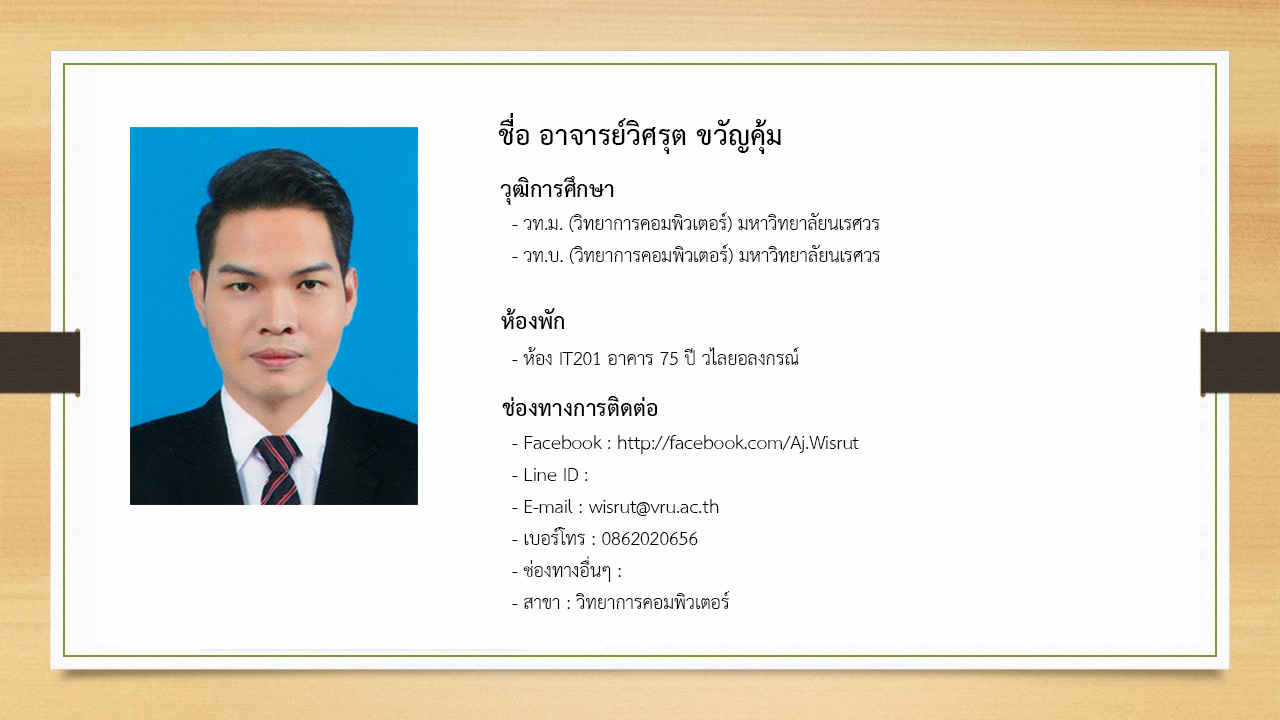
<style>
.page{position:relative;width:1280px;height:720px;background:#fdfdfb}
.page>*{position:absolute;margin:0}
.t1{font:40px "THSarabunPSK-Bold";color:#000000}
.t2{font:32px "THSarabunPSK-Bold";color:#000000}
.t3{font:26.7px "THSarabunPSK";color:#000000}
</style>
<div class="page">
<p class="t1" style="left:498px;top:113px;width:283px;height:41px">ชื่อ อาจารย์วิศรุต ขวัญคุ้ม</p>
<p class="t2" style="left:500px;top:176px;width:114px;height:29px">วุฒิการศึกษา</p>
<p class="t3" style="left:512px;top:212px;width:368px;height:52px">- วท.ม. (วิทยาการคอมพิวเตอร์) มหาวิทยาลัยนเรศวร<br>- วท.บ. (วิทยาการคอมพิวเตอร์) มหาวิทยาลัยนเรศวร</p>
<p class="t2" style="left:501px;top:308px;width:63px;height:21px">ห้องพัก</p>
<p class="t3" style="left:512px;top:347px;width:287px;height:18px">- ห้อง IT201 อาคาร 75 ปี วไลยอลงกรณ์</p>
<p class="t2" style="left:502px;top:396px;width:156px;height:20px">ช่องทางการติดต่อ</p>
<p class="t3" style="left:512px;top:435px;width:347px;height:174px">- Facebook : http://facebook.com/Aj.Wisrut<br>- Line ID :<br>- E-mail : wisrut@vru.ac.th<br>- เบอร์โทร : 0862020656<br>- ช่องทางอื่นๆ :<br>- สาขา : วิทยาการคอมพิวเตอร์</p>
</div>
